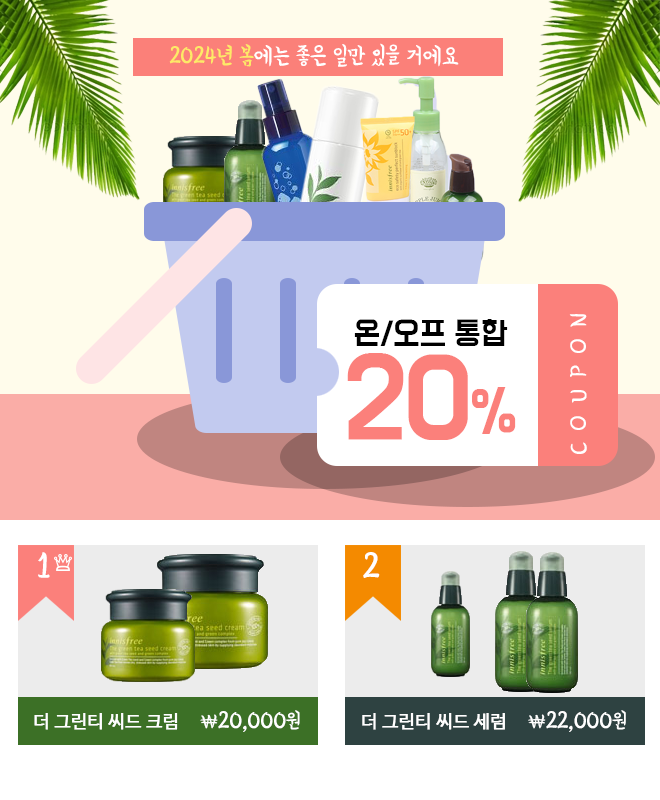
<style>
.page{position:relative;width:660px;height:800px}
.page>*{position:absolute;margin:0}
.t1{font:24px "BMYEONSUNG";letter-spacing:-0.02em;color:#ffffff}
.t2{font:24px "BMYEONSUNG";letter-spacing:-0.02em;color:#fdea67}
.t3{font:24px "BMYEONSUNG";letter-spacing:0.48em;color:#ffffff}
.t4{font:28px/28px "BMDoHyeon";letter-spacing:-0.02em;color:#000000}
.t5{font:100px/84px "BMDoHyeon";letter-spacing:-0.02em;color:#fb807b}
.t6{font:52px/84px "BMDoHyeon";letter-spacing:-0.02em;color:#fb807b}
.t7{font:36px "BMYEONSUNG";color:#ffffff}
.t8{font:18px "NanumBarunGothic";color:#ffffff;font-weight:bold}
.t9{font:18px "BMYEONSUNG";letter-spacing:-0.02em;color:#ffffff}
.t10{font:22px "BMYEONSUNG";color:#ffffff}
</style>
<div class="page">
<p class="t1" style="left:169px;top:43px;width:290px;height:24px"><span class="t2">2024년 봄</span>에는 좋은 일만 있을 거에요</p>
<p class="t3" style="left:569px;top:314px;width:18px;height:140px;rotate:180deg">COUPON</p>
<p class="t4" style="left:347px;top:319px;width:169px;height:121px;text-align:center">온/오프 통합<br><span class="t5">20</span><span class="t6">%</span></p>
<p class="t7" style="left:38px;top:552px;width:12px;height:26px">1</p>
<p class="t7" style="left:363px;top:552px;width:17px;height:26px">2</p>
<p class="t8" style="left:34px;top:710px;width:266px;height:22px">더 그린티 씨드 크림 <span class="t9">\</span><span class="t1">20,000</span><span class="t10">원</span></p>
<p class="t8" style="left:362px;top:710px;width:264px;height:22px">더 그린티 씨드 세럼 <span class="t9">\</span><span class="t1">22,000</span><span class="t10">원</span></p>
</div>
